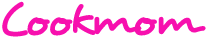
<style>
.page{position:relative;width:210px;height:38px;background:#ffffff}
.page>*{position:absolute;margin:0}
.t1{font:48px "Desyrel";letter-spacing:-0.075em;color:#f710ae}
</style>
<div class="page">
<p class="t1" style="left:2px;top:1px;width:204px;height:36px">Cookmom</p>
</div>
